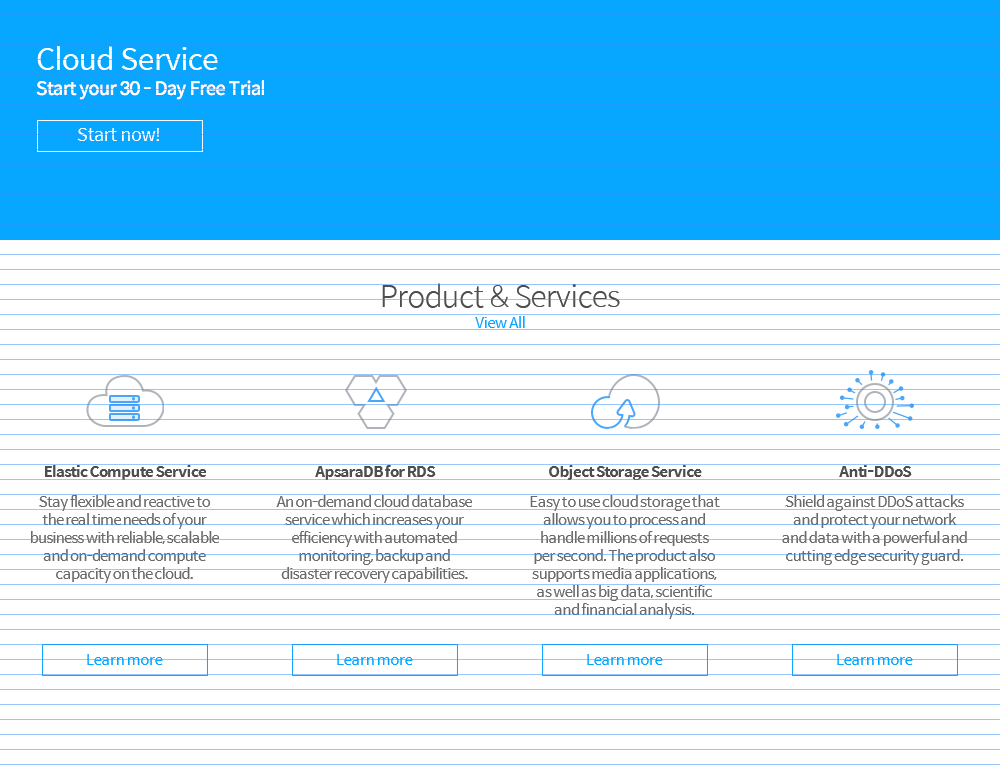
<style>
.page{position:relative;width:1000px;height:772px;background:#ffffff}
.page>*{position:absolute;margin:0}
.t1{font:30px "SpoqaHanSans-Regular";letter-spacing:-0.025em;color:#ffffff}
.t2{font:18px "SpoqaHanSans-Regular";letter-spacing:-0.025em;color:#ffffff}
.t3{font:30px "SpoqaHanSans-Light";letter-spacing:-0.025em;color:#4e4e4e}
.t4{font:15px "SpoqaHanSans-Regular";letter-spacing:-0.025em;color:#07a6ff}
.t5{font:15px "SpoqaHanSans-Bold";letter-spacing:-0.05em;color:#4e4e4e}
.t6{font:15px "SpoqaHanSans-Regular";letter-spacing:-0.05em;color:#6b6a6a}
</style>
<div class="page">
<p class="t1" style="left:37px;top:46px;width:181px;height:24px">Cloud Service</p>
<p class="t2" style="left:36px;top:80px;width:228px;height:20px">Start your 30 - Day Free Trial</p>
<p class="t2" style="left:77px;top:128px;width:82px;height:13px">Start now!</p>
<p class="t3" style="left:382px;top:283px;width:238px;height:25px">Product &amp; Services</p>
<p class="t4" style="left:475px;top:316px;width:50px;height:12px">View All</p>
<p class="t5" style="left:45px;top:465px;width:161px;height:15px">Elastic Compute Service</p>
<p class="t5" style="left:315px;top:465px;width:121px;height:15px">ApsaraDB for RDS</p>
<p class="t5" style="left:549px;top:465px;width:153px;height:15px">Object Storage Service</p>
<p class="t5" style="left:839px;top:465px;width:73px;height:12px">Anti-DDoS</p>
<p class="t6" style="left:31px;top:495px;width:188px;height:88px;text-align:center">Stay flexible and reactive to the real time needs of your business with reliable, scalable and on-demand compute capacity on the cloud.</p>
<p class="t6" style="left:276px;top:495px;width:196px;height:88px;text-align:center">An on-demand cloud database service which increases your efficiency with automated monitoring, backup and disaster recovery capabilities.</p>
<p class="t6" style="left:530px;top:495px;width:190px;height:124px;text-align:center">Easy to use cloud storage that allows you to process and handle millions of requests per second. The product also supports media applications, as well as big data, scientific and financial analysis.</p>
<p class="t6" style="left:782px;top:495px;width:185px;height:70px;text-align:center">Shield against DDoS attacks and protect your network and data with a powerful and cutting edge security guard.</p>
<p class="t4" style="left:87px;top:654px;width:76px;height:11px">Learn more</p>
<p class="t4" style="left:337px;top:654px;width:76px;height:11px">Learn more</p>
<p class="t4" style="left:587px;top:654px;width:76px;height:11px">Learn more</p>
<p class="t4" style="left:837px;top:654px;width:76px;height:11px">Learn more</p>
</div>
